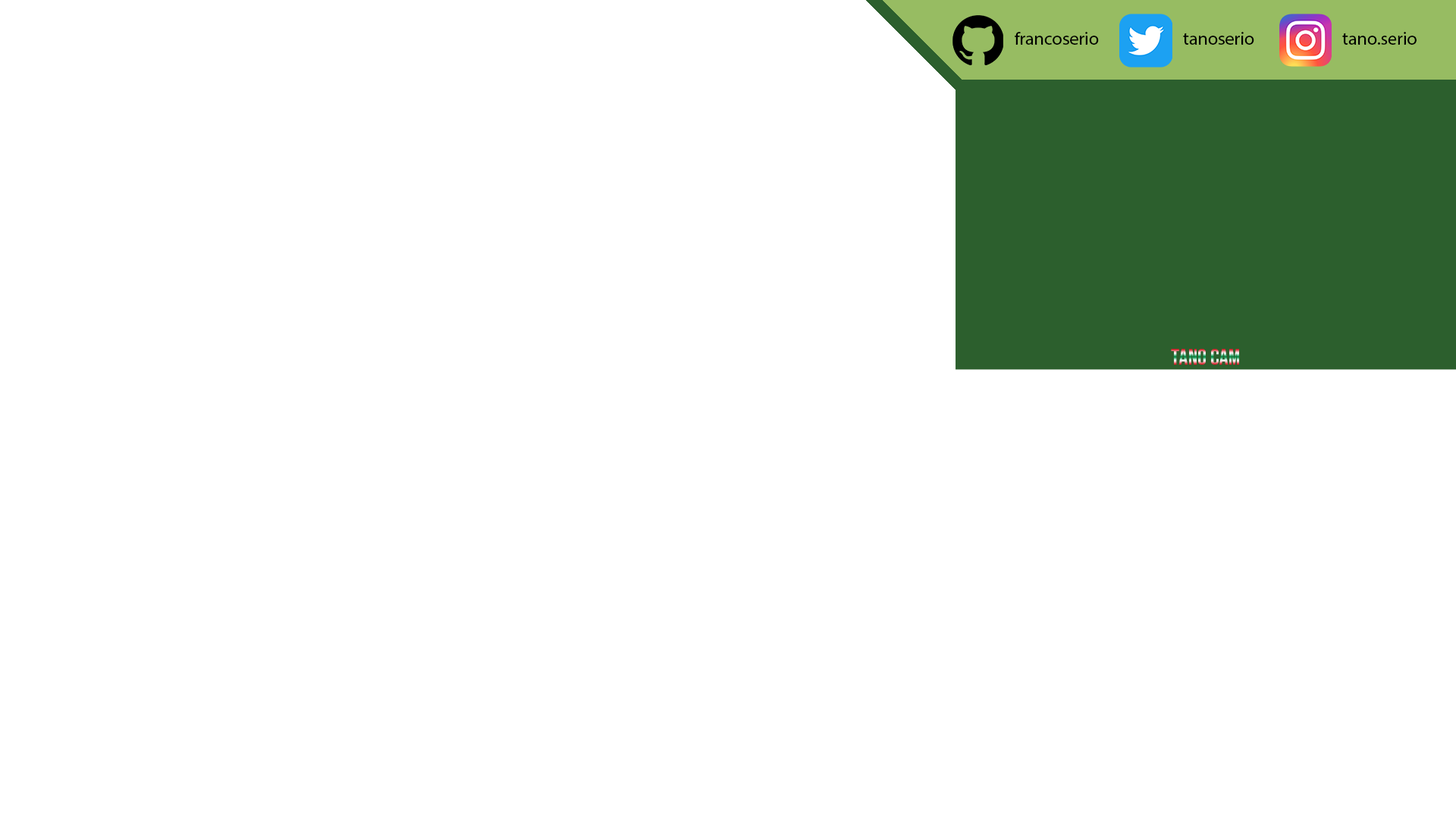
<style>
.page{position:relative;width:1456px;height:819px;background:#ffffff}
.page>*{position:absolute;margin:0}
.t1{font:18.2px "MyriadPro-Regular";color:#000000}
.t2{font:22.7px "BebasNeue-Regular"}
</style>
<div class="page">
<p class="t1" style="left:1015px;top:32px;width:84px;height:13px">francoserio</p>
<p class="t1" style="left:1183px;top:32px;width:71px;height:13px">tanoserio</p>
<p class="t1" style="left:1342px;top:32px;width:75px;height:13px">tano.serio</p>
<p class="t2" style="left:1171px;top:349px;width:68px;height:16px">Tano Cam</p>
</div>
